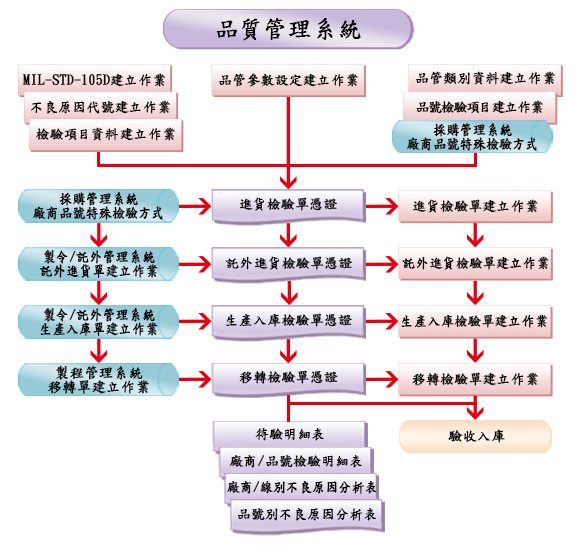
<style>
.page{position:relative;width:577px;height:545px;background:#ffffff}
.page>*{position:absolute;margin:0}
.t1{font:24px "DFKaiShu-SB-Estd-BF";color:#000000;font-weight:bold}
.t2{font:13.8px "DFKaiShu-SB-Estd-BF";color:#000000;font-weight:bold}
.t3{font:13.8px "DFKaiShu-SB-Estd-BF";letter-spacing:-0.1em;color:#000000;font-weight:bold}
.t4{font:14.4px/14px "DFKaiShu-SB-Estd-BF";color:#000000;font-weight:bold;scale:0.9 1}
.t5{font:13.8px "DFKaiShu-SB-Estd-BF";letter-spacing:-0.15em;color:#000000;font-weight:bold}
.t6{font:13.8px "DFKaiShu-SB-Estd-BF";letter-spacing:0.05em;color:#000000;font-weight:bold}
.t7{font:13.8px "DFKaiShu-SB-Estd-BF";color:#000000;font-weight:bold;scale:0.95 1}
.t8{font:14.4px/14px "DFKaiShu-SB-Estd-BF";color:#000000;font-weight:bold}
.t9{font:14px "DFKaiShu-SB-Estd-BF";color:#000000;font-weight:bold}
.t10{font:13.8px "DFKaiShu-SB-Estd-BF";color:#000000;font-weight:bold;scale:0.93 1}
</style>
<div class="page">
<p class="t1" style="left:216px;top:18px;width:145px;height:23px">品質管理系統</p>
<p class="t2" style="left:23px;top:73px;width:143px;height:14px">MIL-STD-105D建立作業</p>
<p class="t2" style="left:219px;top:73px;width:139px;height:14px">品管參數設定建立作業</p>
<p class="t2" style="left:416px;top:71px;width:139px;height:14px">品管類別資料建立作業</p>
<p class="t2" style="left:31px;top:100px;width:139px;height:14px">不良原因代號建立作業</p>
<p class="t3" style="left:416px;top:100px;width:127px;height:14px">品號檢驗項目建立作業</p>
<p class="t4" style="left:406px;top:123px;width:131px;height:28px;text-align:center">採購管理系統<br>廠商品號特殊檢驗方式</p>
<p class="t2" style="left:36px;top:127px;width:139px;height:14px">檢驗項<span class="t5">目</span><span class="t6">資料</span>建立作業</p>
<p class="t4" style="left:32px;top:192px;width:131px;height:28px;text-align:center">採購管理系統<br>廠商品號特殊檢驗方式</p>
<p class="t2" style="left:239px;top:197px;width:99px;height:14px">進貨檢驗單憑證</p>
<p class="t2" style="left:413px;top:199px;width:125px;height:14px">進貨檢驗單建立作業</p>
<p class="t4" style="left:39px;top:249px;width:119px;height:29px;text-align:center">製令/託外管理系統<br>託外進貨單建立作業</p>
<p class="t2" style="left:225px;top:256px;width:128px;height:14px">託外進貨檢驗單憑證</p>
<p class="t7" style="left:402px;top:256px;width:147px;height:14px">託外進貨檢驗單建立作業</p>
<p class="t4" style="left:40px;top:307px;width:118px;height:29px;text-align:center">製令/託外管理系統<br>生產入庫單建立作業</p>
<p class="t2" style="left:226px;top:313px;width:126px;height:14px">生產入庫檢驗單憑證</p>
<p class="t7" style="left:401px;top:314px;width:147px;height:14px">生產入庫檢驗單建立作業</p>
<p class="t8" style="left:48px;top:365px;width:101px;height:29px;text-align:center">製程管理系統<br>移轉單建立作業</p>
<p class="t2" style="left:239px;top:370px;width:99px;height:14px">移轉檢驗單憑證</p>
<p class="t2" style="left:412px;top:372px;width:126px;height:14px">移轉檢驗單建立作業</p>
<p class="t2" style="left:255px;top:428px;width:69px;height:13px">待驗明細表</p>
<p class="t9" style="left:448px;top:429px;width:57px;height:14px">驗收入庫</p>
<p class="t2" style="left:229px;top:455px;width:133px;height:13px">廠商/品號檢驗明細表</p>
<p class="t10" style="left:227px;top:480px;width:150px;height:14px">廠商/線別不良原因分析表</p>
<p class="t2" style="left:237px;top:508px;width:139px;height:13px">品號別不良原因分析表</p>
</div>
